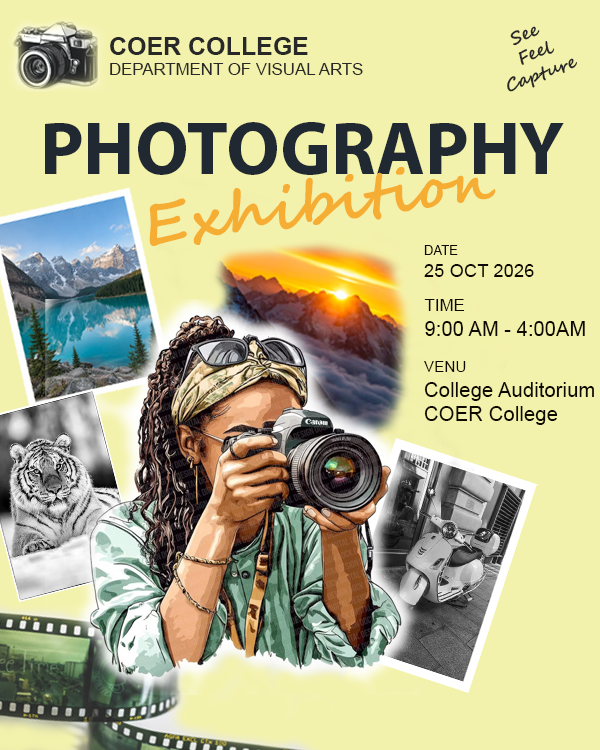
<style>
.page{position:relative;width:600px;height:750px;background:#f3f2ac}
.page>*{position:absolute;margin:0}
.t1{font:17.8px "SegoeScript-Bold";color:#282828}
.t2{font:16.8px "ArialMT";color:#282828}
.t3{font:25px "Arial-BoldMT";color:#282828}
.t4{font:75px "MyriadPro-Bold";color:#202831}
.t5{font:58.3px "SegoeScript-Bold";color:#f5ae33}
.t6{font:18.5px "ArialMT";color:#0e0901}
.t7{font:13px "ArialMT";color:#0e0901}
.t8{font:20.2px "ArialMT";color:#0e0901}
.t9{font:16.8px "ArialMT";color:#0e0901}
.t10{font:20.4px "ArialMT";color:#0e0901}
.t11{font:15.3px "ArialMT";color:#0e0901}
</style>
<div class="page">
<p class="t1" style="left:507px;top:26px;width:70px;height:66px;rotate:-20deg">See<br>   Feel<br>Capture</p>
<p class="t2" style="left:110px;top:37px;width:253px;height:38px"><span class="t3">COER COLLEGE<br></span>DEPARTMENT OF VISUAL ARTS</p>
<p class="t4" style="left:45px;top:122px;width:519px;height:53px">PHOTOGRAPHY</p>
<p class="t5" style="left:149px;top:167px;width:347px;height:79px;rotate:-8deg">Exhibition</p>
<p class="t6" style="left:424px;top:245px;width:110px;height:32px"><span class="t7">DATE<br></span>25 OCT 2026</p>
<p class="t8" style="left:424px;top:299px;width:161px;height:37px"><span class="t9">TIME<br></span>9:00 AM - 4:00AM</p>
<p class="t10" style="left:424px;top:361px;width:170px;height:64px"><span class="t11">VENU<br></span>College Auditorium<br>COER College</p>
</div>
